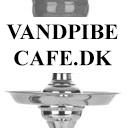
<style>
.page{position:relative;width:128px;height:128px;background:#ffffff}
.page>*{position:absolute;margin:0}
.t1{font:22px "TimesNewRomanPS-BoldMT";color:#000000}
</style>
<div class="page">
<p class="t1" style="left:6px;top:24px;width:112px;height:42px;text-align:center">VANDPIBE<br>CAFE.DK</p>
</div>
